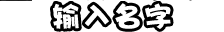
<style>
.page{position:relative;width:224px;height:32px;background:#ffffff}
.page>*{position:absolute;margin:0}
.t1{font:28px "DFPHaiBaoW12";letter-spacing:0.1em;color:#ffffff}
</style>
<div class="page">
<p class="t1" style="left:53px;top:3px;width:118px;height:26px">输入名字</p>
</div>
